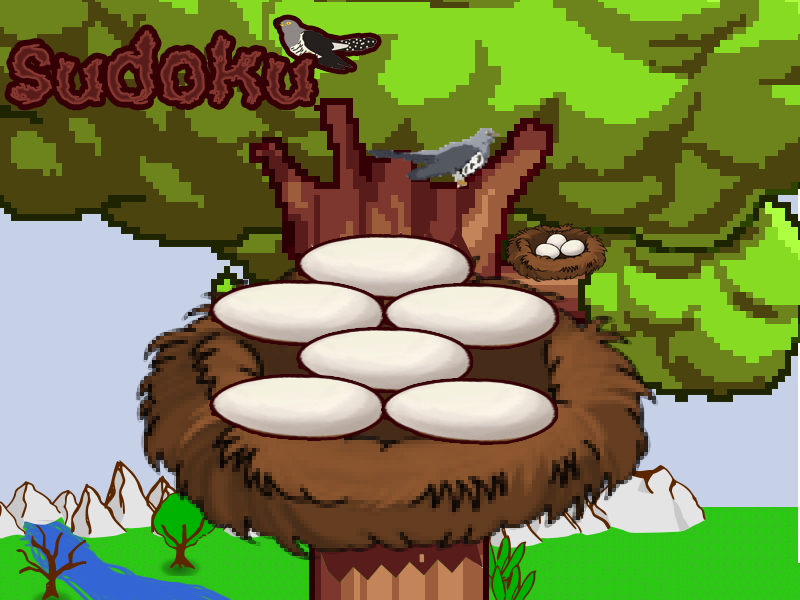
<style>
.page{position:relative;width:800px;height:600px}
.page>*{position:absolute;margin:0}
.t1{font:100px "TOBACCO";font-weight:bold}
</style>
<div class="page">
<p class="t1" style="left:10px;top:30px;width:304px;height:75px">sudoku</p>
</div>
